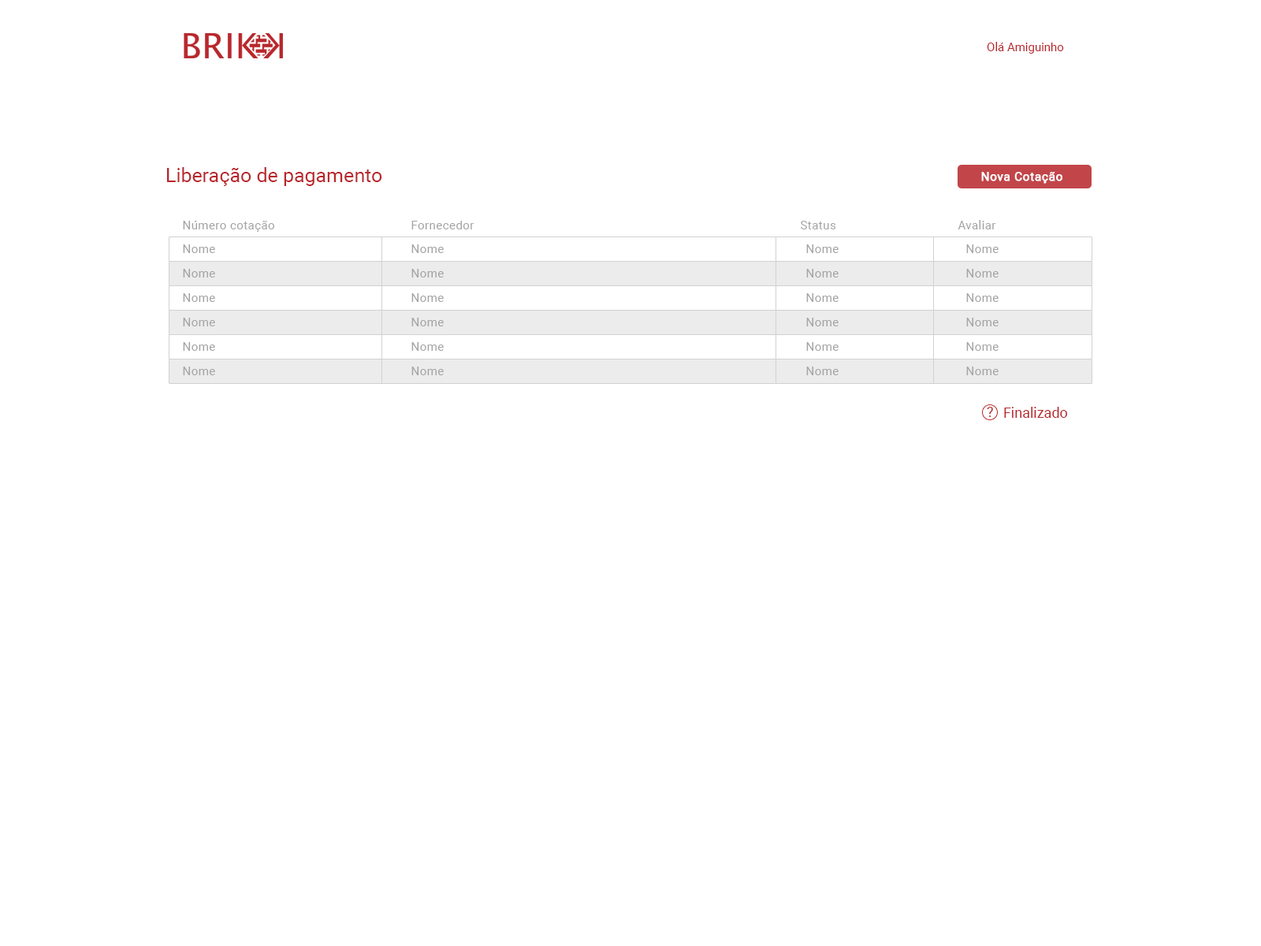
<style>
.page{position:relative;width:1261px;height:946px;background:#ffffff}
.page>*{position:absolute;margin:0}
.t1{font:11.8px "Roboto-Regular";color:#b8272c}
.t2{font:19.7px "Roboto-Regular";color:#b8272c}
.t3{font:11.8px "Roboto-Regular";letter-spacing:0.03em;color:#ffffff;font-weight:bold}
.t4{font:11.8px "Roboto-Regular";letter-spacing:0.03em;color:#a4a4a4}
.t5{font:14.2px "Roboto-Regular";color:#b8272c}
</style>
<div class="page">
<p class="t1" style="left:987px;top:42px;width:77px;height:12px">Olá Amiguinho</p>
<p class="t2" style="left:167px;top:167px;width:215px;height:19px">Liberação de pagamento</p>
<p class="t3" style="left:981px;top:172px;width:81px;height:12px">Nova Cotação</p>
<p class="t4" style="left:183px;top:221px;width:91px;height:11px">Número cotação</p>
<p class="t4" style="left:411px;top:221px;width:63px;height:8px">Fornecedor</p>
<p class="t4" style="left:801px;top:221px;width:35px;height:8px">Status</p>
<p class="t4" style="left:958px;top:220px;width:38px;height:9px">Avaliar</p>
<p class="t4" style="left:183px;top:244px;width:32px;height:9px">Nome</p>
<p class="t4" style="left:411px;top:244px;width:33px;height:9px">Nome</p>
<p class="t4" style="left:806px;top:244px;width:33px;height:9px">Nome</p>
<p class="t4" style="left:966px;top:244px;width:32px;height:9px">Nome</p>
<p class="t4" style="left:183px;top:269px;width:32px;height:8px">Nome</p>
<p class="t4" style="left:411px;top:269px;width:33px;height:8px">Nome</p>
<p class="t4" style="left:806px;top:269px;width:33px;height:8px">Nome</p>
<p class="t4" style="left:966px;top:269px;width:32px;height:8px">Nome</p>
<p class="t4" style="left:183px;top:293px;width:32px;height:9px">Nome</p>
<p class="t4" style="left:411px;top:293px;width:33px;height:9px">Nome</p>
<p class="t4" style="left:806px;top:293px;width:33px;height:9px">Nome</p>
<p class="t4" style="left:966px;top:293px;width:32px;height:9px">Nome</p>
<p class="t4" style="left:183px;top:318px;width:32px;height:8px">Nome</p>
<p class="t4" style="left:411px;top:318px;width:33px;height:8px">Nome</p>
<p class="t4" style="left:806px;top:318px;width:33px;height:8px">Nome</p>
<p class="t4" style="left:966px;top:318px;width:32px;height:8px">Nome</p>
<p class="t4" style="left:183px;top:342px;width:32px;height:9px">Nome</p>
<p class="t4" style="left:411px;top:342px;width:33px;height:9px">Nome</p>
<p class="t4" style="left:806px;top:342px;width:33px;height:9px">Nome</p>
<p class="t4" style="left:966px;top:342px;width:32px;height:9px">Nome</p>
<p class="t4" style="left:183px;top:366px;width:32px;height:9px">Nome</p>
<p class="t4" style="left:411px;top:366px;width:33px;height:9px">Nome</p>
<p class="t4" style="left:806px;top:366px;width:33px;height:9px">Nome</p>
<p class="t4" style="left:966px;top:366px;width:32px;height:9px">Nome</p>
<p class="t5" style="left:987px;top:407px;width:6px;height:10px">?</p>
<p class="t5" style="left:1004px;top:407px;width:63px;height:11px">Finalizado</p>
</div>
